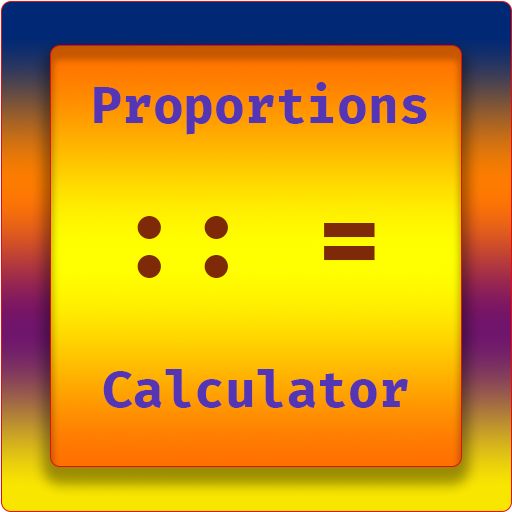
<style>
.page{position:relative;width:512px;height:512px}
.page>*{position:absolute;margin:0}
.t1{font:50px "FiraCode-Bold";color:#5436b4}
.t2{font:108.3px "FiraCode-Bold";color:#7e2908}
</style>
<div class="page">
<p class="t1" style="left:94px;top:82px;width:333px;height:53px">Proportions</p>
<p class="t2" style="left:137px;top:216px;width:238px;height:62px">:: =</p>
<p class="t1" style="left:103px;top:369px;width:305px;height:39px">Calculator</p>
</div>
